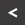
<style>
.page{position:relative;width:25px;height:25px;background:#3c3a3a}
.page>*{position:absolute;margin:0}
.t1{font:18px "LuzSans-Book";color:#ffffff;font-weight:bold}
</style>
<div class="page">
<p class="t1" style="left:8px;top:8px;width:10px;height:10px">&lt;</p>
</div>
